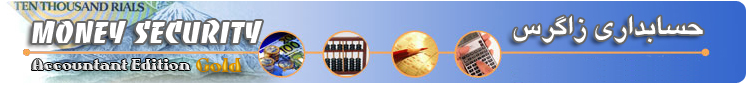
<style>
.page{position:relative;width:747px;height:85px}
.page>*{position:absolute;margin:0}
.t1{font:30px "Baccarat";color:#ffffff}
.t2{font:18px "AuntBertha"}
.t3{font:22px "AuntBertha"}
</style>
<div class="page">
<p class="t1" style="left:32px;top:20px;width:230px;height:23px">Money Security</p>
<p class="t2" style="left:32px;top:59px;width:158px;height:11px">Accountant Edition</p>
<p class="t3" style="left:196px;top:58px;width:46px;height:14px">Gold</p>
</div>
